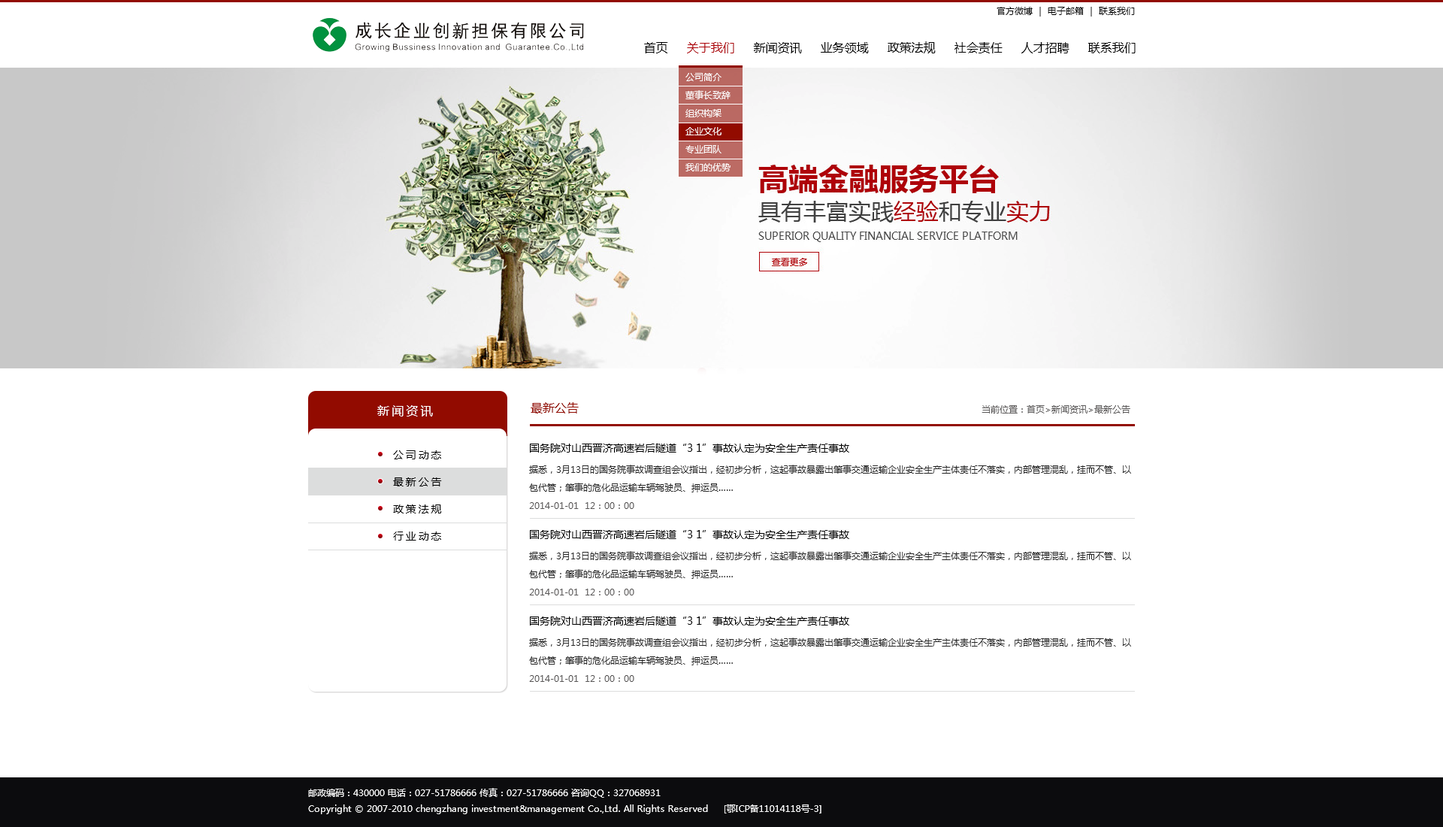
<style>
.page{position:relative;width:1443px;height:827px;background:#ffffff}
.page>*{position:absolute;margin:0}
.t1{font:9px "MicrosoftYaHei";color:#010101}
.t2{font:12px "MicrosoftYaHei";color:#000000}
.t3{font:12px "MicrosoftYaHei";color:#ae0309}
.t4{font:9px/3px "MicrosoftYaHei";color:#ffffff}
.t5{font:12px "MicrosoftYaHei";color:#920b00;text-transform:uppercase}
.t6{font:12px "MicrosoftYaHei";letter-spacing:0.2em;color:#fefefe;text-transform:uppercase}
.t7{font:9px "MicrosoftYaHei";color:#595757;text-transform:uppercase}
.t8{font:9px/18px "MicrosoftYaHei";color:#272727;text-transform:uppercase}
.t9{font:10.5px/22.5px "MicrosoftYaHei";color:#010101;text-transform:uppercase}
.t10{font:9px/18px "MicrosoftYaHei";color:#595757;text-transform:uppercase}
.t11{font:10.5px/27.1px "MicrosoftYaHei";letter-spacing:0.2em;color:#000000;text-transform:uppercase}
.t12{font:9px/0.8px "MicrosoftYaHei";color:#fefefe}
</style>
<div class="page">
<p class="t1" style="left:996px;top:7px;width:139px;height:10px">官方微博 ｜ 电子邮箱 ｜ 联系我们</p>
<p class="t2" style="left:644px;top:41px;width:491px;height:12px">首页     <span class="t3">关于我们</span>     新闻资讯     业务领域     政策法规     社会责任     人才招聘     联系我们</p>
<p class="t4" style="left:685px;top:73px;width:45px;height:98px">公司简介<br>董事长致辞<br>组织构架<br>企业文化<br>专业团队<br>我们的优势</p>
<p class="t5" style="left:530px;top:402px;width:49px;height:11px">最新公告</p>
<p class="t6" style="left:377px;top:405px;width:56px;height:11px">新闻资讯</p>
<p class="t7" style="left:981px;top:405px;width:149px;height:8px">当前位置：首页&gt;新闻资讯&gt;最新公告</p>
<p class="t8" style="left:529px;top:443px;width:602px;height:66px"><span class="t9">国务院对山西晋济高速岩后隧道“3 1”事故认定为安全生产责任事故<br></span>据悉，3月13日的国务院事故调查组会议指出，经初步分析，这起事故暴露出肇事交通运输企业安全生产主体责任不落实，内部管理混乱，挂而不管、以包代管；肇事的危化品运输车辆驾驶员、押运员……<br><span class="t10">2014-01-01  12：00：00</span></p>
<p class="t11" style="left:393px;top:450px;width:49px;height:90px">公司动态<br>最新公告<br>政策法规<br>行业动态</p>
<p class="t8" style="left:529px;top:530px;width:602px;height:65px"><span class="t9">国务院对山西晋济高速岩后隧道“3 1”事故认定为安全生产责任事故<br></span>据悉，3月13日的国务院事故调查组会议指出，经初步分析，这起事故暴露出肇事交通运输企业安全生产主体责任不落实，内部管理混乱，挂而不管、以包代管；肇事的危化品运输车辆驾驶员、押运员……<br><span class="t10">2014-01-01  12：00：00</span></p>
<p class="t8" style="left:529px;top:616px;width:602px;height:66px"><span class="t9">国务院对山西晋济高速岩后隧道“3 1”事故认定为安全生产责任事故<br></span>据悉，3月13日的国务院事故调查组会议指出，经初步分析，这起事故暴露出肇事交通运输企业安全生产主体责任不落实，内部管理混乱，挂而不管、以包代管；肇事的危化品运输车辆驾驶员、押运员……<br><span class="t10">2014-01-01  12：00：00</span></p>
<p class="t12" style="left:308px;top:787px;width:513px;height:27px">邮政编码：430000 电话：027-51786666 传真：027-51786666 咨询QQ：327068931<br>Copyright © 2007-2010 chengzhang investment&amp;management Co.,Ltd. All Rights Reserved     [鄂ICP备11014118号-3]</p>
</div>
